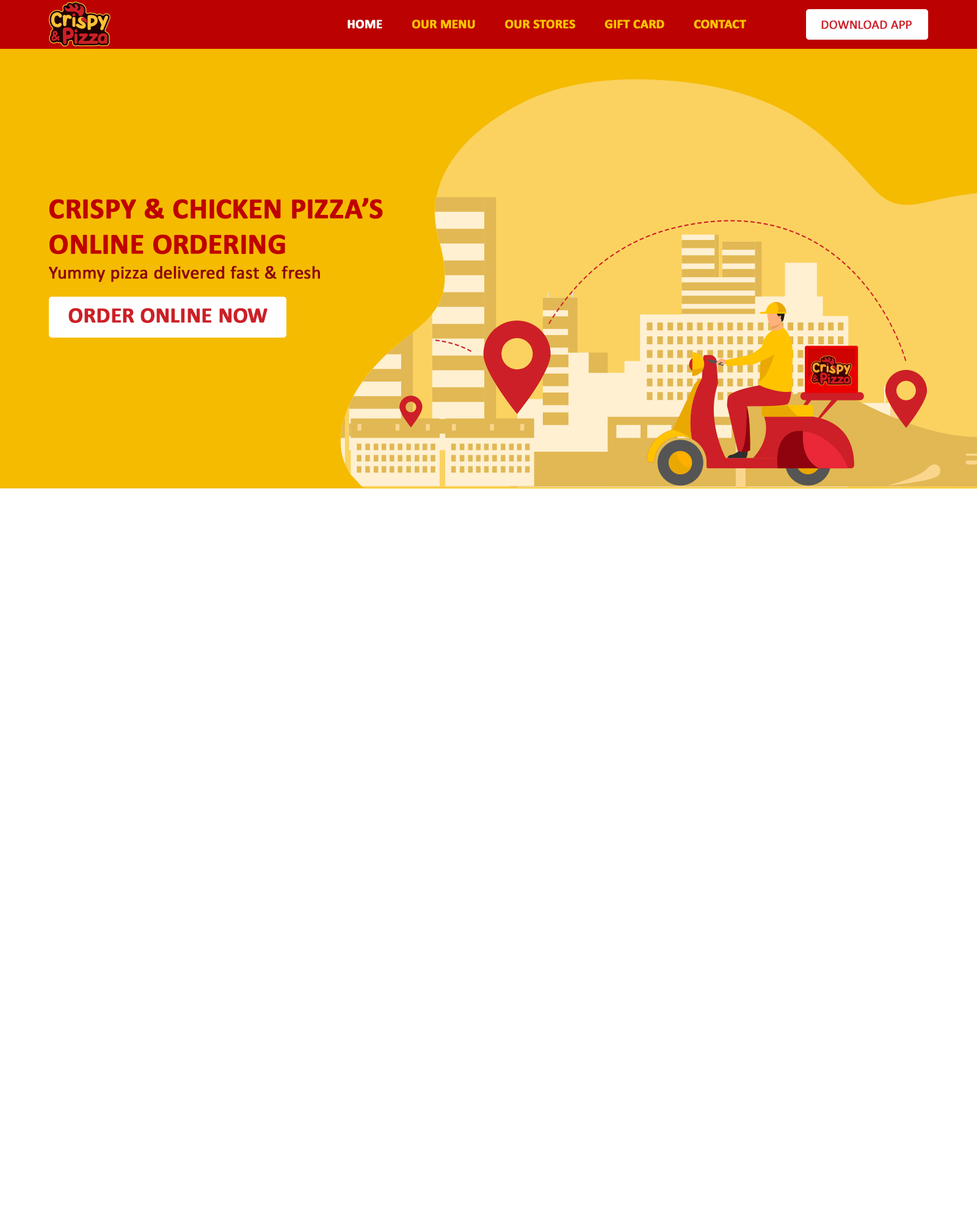
<style>
.page{position:relative;width:977px;height:1221px;background:#ffffff}
.page>*{position:absolute;margin:0}
.t1{font:12.8px "Calibri-Bold";color:#ffc300;font-weight:bold}
.t2{font:12.8px "Calibri-Bold";color:#ffffff;font-weight:bold}
.t3{font:12.8px "Calibri";color:#cd1f27;font-weight:bold}
.t4{font:29.3px "Calibri-Bold";color:#bf0000;font-weight:bold}
.t5{font:18.3px "Calibri";color:#8e030e;font-weight:bold}
.t6{font:22px "Calibri-Bold";color:#cd1f27;font-weight:bold}
</style>
<div class="page">
<p class="t1" style="left:347px;top:20px;width:399px;height:9px"><span class="t2">HOME         </span>OUR MENU         OUR STORES         GIFT CARD         CONTACT</p>
<p class="t3" style="left:821px;top:20px;width:90px;height:9px">DOWNLOAD APP</p>
<p class="t4" style="left:49px;top:198px;width:334px;height:57px">CRISPY &amp; CHICKEN PIZZA’S<br>ONLINE ORDERING</p>
<p class="t5" style="left:49px;top:266px;width:271px;height:16px">Yummy pizza delivered fast &amp; fresh</p>
<p class="t6" style="left:68px;top:308px;width:199px;height:15px">ORDER ONLINE NOW</p>
</div>
